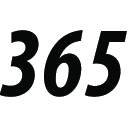
<style>
.page{position:relative;width:128px;height:128px;background:#ffffff}
.page>*{position:absolute;margin:0}
.t1{font:100px "MyriadPro-BoldCondIt";color:#070a0a}
</style>
<div class="page">
<p class="t1" style="left:0px;top:30px;width:127px;height:67px">365</p>
</div>
